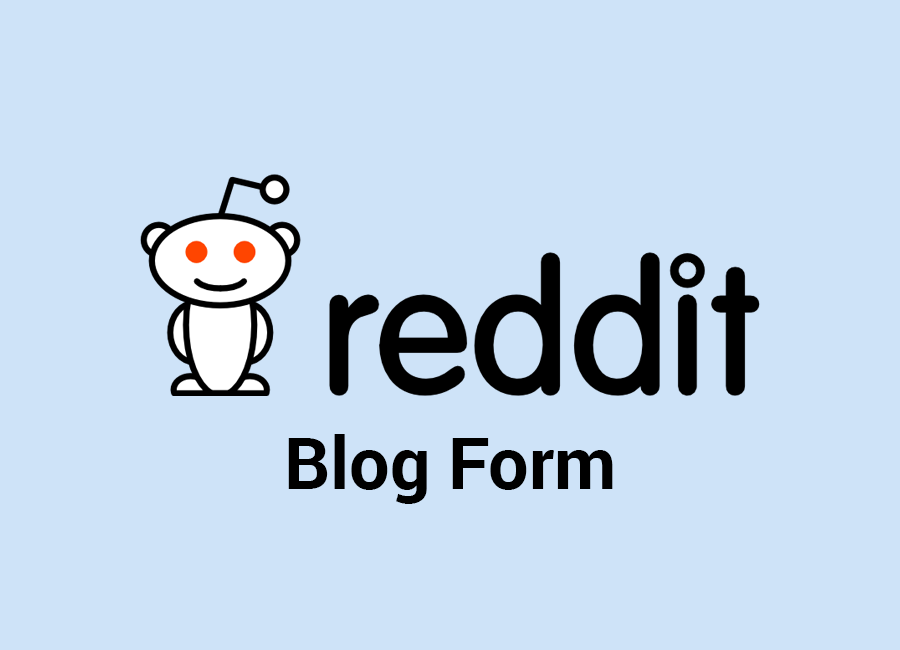
<style>
.page{position:relative;width:900px;height:650px;background:#cee3f8}
.page>*{position:absolute;margin:0}
.t1{font:72px "Roboto-Bold";color:#000000}
</style>
<div class="page">
<p class="t1" style="left:288px;top:434px;width:325px;height:70px">Blog Form</p>
</div>
